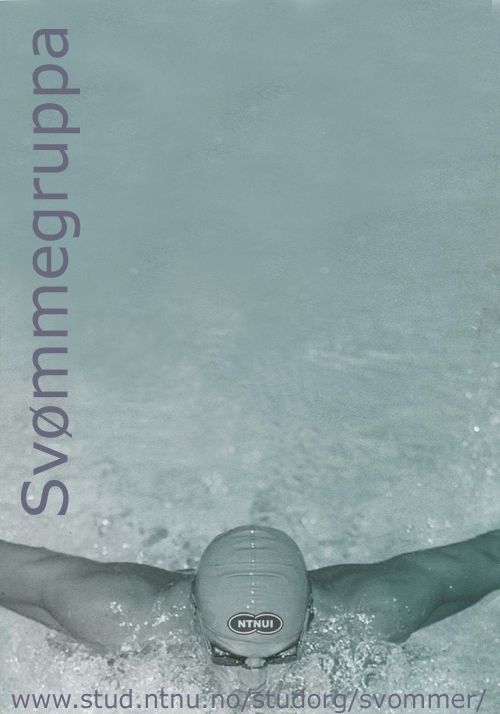
<style>
.page{position:relative;width:500px;height:714px}
.page>*{position:absolute;margin:0}
.t1{font:62.5px "Verdana";color:#68697d}
.t2{font:25px "Verdana";color:#68697d}
</style>
<div class="page">
<p class="t1" style="left:21px;top:29px;width:60px;height:486px;rotate:-90deg">Svømmegruppa</p>
<p class="t2" style="left:11px;top:689px;width:476px;height:25px">www.stud.ntnu.no/studorg/svommer/</p>
</div>
